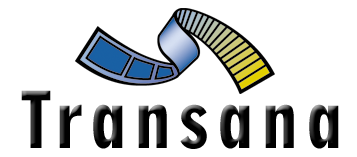
<style>
.page{position:relative;width:357px;height:157px;background:#ffffff}
.page>*{position:absolute;margin:0}
.t1{font:75px "Geometric706BT-BlackCondensedB";letter-spacing:0.1em;color:#000000}
</style>
<div class="page">
<p class="t1" style="left:21px;top:90px;width:318px;height:59px">Transana</p>
</div>
